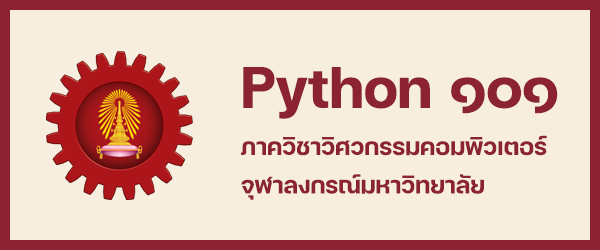
<style>
.page{position:relative;width:600px;height:250px;background:#f8eedf}
.page>*{position:absolute;margin:0}
.t1{font:80px "FCMinimalBold";color:#8b2332}
.t2{font:32px "FCMinimalBold";color:#8b2332}
</style>
<div class="page">
<p class="t1" style="left:243px;top:67px;width:315px;height:52px">Python ๑๐๑</p>
<p class="t2" style="left:241px;top:135px;width:306px;height:65px">ภาควิชาวิศวกรรมคอมพิวเตอร์<br>จุฬาลงกรณ์มหาวิทยาลัย</p>
</div>
